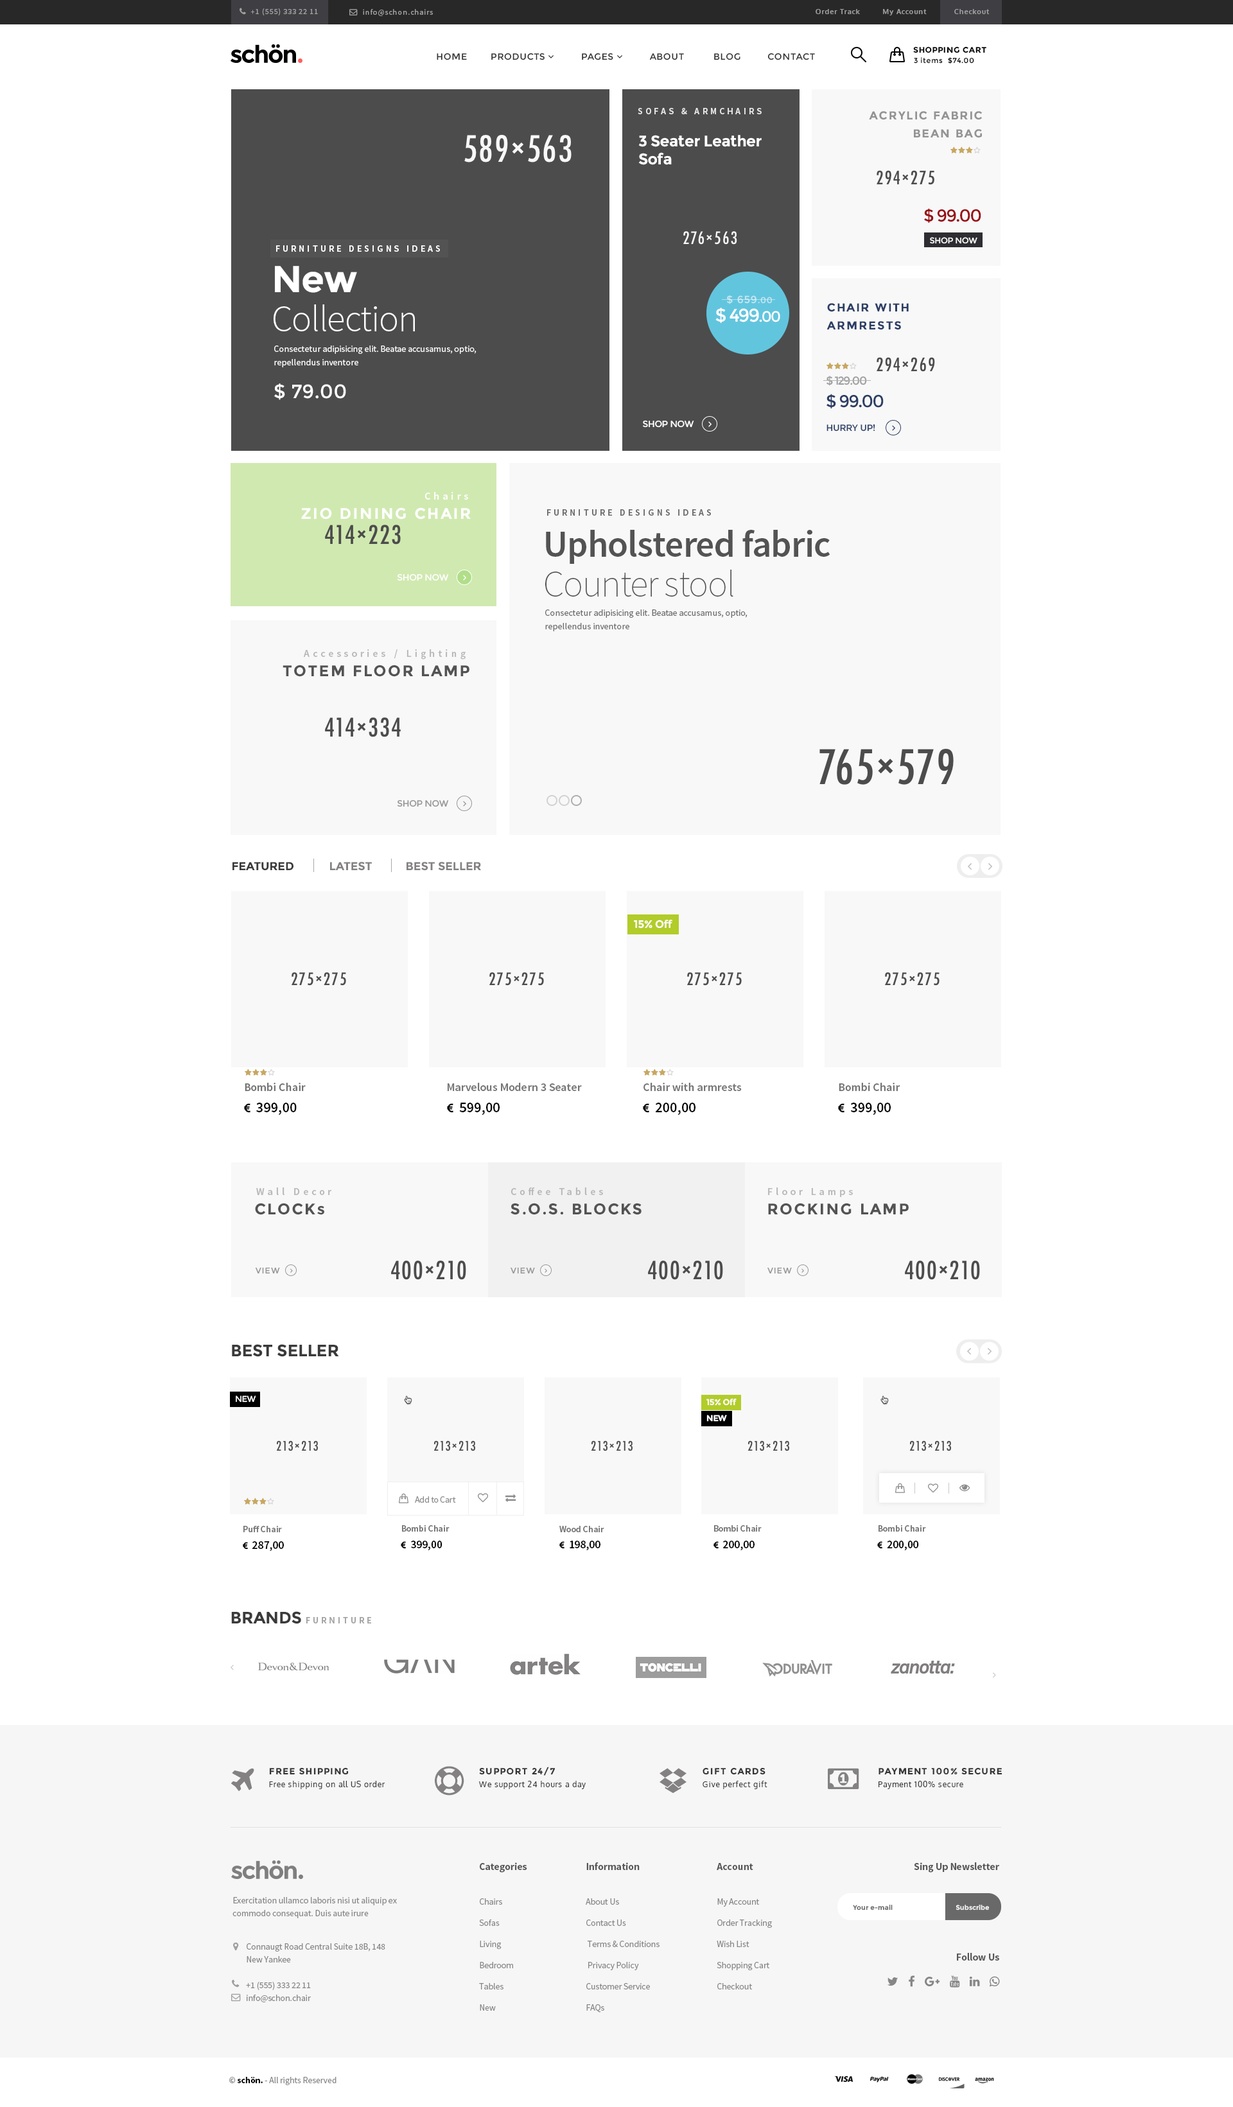
<style>
.page{position:relative;width:1233px;height:2107px;background:#ffffff}
.page>*{position:absolute;margin:0}
.t1{font:7.1px "Oxygen-Bold";letter-spacing:0.08em;color:#a1a1a1}
.t2{font:8px "Montserrat-Bold";letter-spacing:0.06em;color:#000000}
.t3{font:7.1px "Montserrat-Regular";letter-spacing:0.06em;color:#000000}
.t4{font:9px "SourceSansPro-Semibold";letter-spacing:0.3em;color:#e8e8e8}
.t5{font:11.6px/17.9px "Montserrat-Bold";letter-spacing:0.1em;color:#939393}
.t6{font:15.4px/18px "Montserrat-Bold";letter-spacing:-0.02em;color:#ffffff}
.t7{font:17.1px "Montserrat-Regular";letter-spacing:-0.08em;color:#991015}
.t8{font:9px "SourceSansPro-Semibold";letter-spacing:0.3em;color:#ffffff}
.t9{font:8.3px "Montserrat-Regular";letter-spacing:-0.02em;color:#ffffff}
.t10{font:37.4px "Montserrat-Bold";letter-spacing:-0.02em;color:#ffffff}
.t11{font:37.4px "SourceSansPro-Light";letter-spacing:-0.02em;color:#ffffff}
.t12{font:10.2px "Montserrat-Regular";letter-spacing:0.08em;color:#c5e7f1}
.t13{font:8.3px "Montserrat-Regular";letter-spacing:0.08em;color:#c5e7f1}
.t14{font:11.6px/17.9px "Montserrat-Bold";letter-spacing:0.1em;color:#2c3e66}
.t15{font:18.4px "Montserrat-Regular";letter-spacing:-0.06em;color:#ffffff}
.t16{font:15px "Montserrat-Regular";letter-spacing:-0.06em;color:#ffffff}
.t17{font:9px/13.5px "SourceSansPro-Regular";color:#ffffff}
.t18{font:11.4px "Montserrat-Regular";letter-spacing:-0.08em;color:#9f9f9f}
.t19{font:19.3px "Montserrat-Regular";color:#ffffff}
.t20{font:17.1px "Montserrat-Regular";letter-spacing:-0.08em;color:#2c3e65}
.t21{font:9px "Montserrat-Regular";letter-spacing:-0.02em;color:#ffffff}
.t22{font:9px "Montserrat-Regular";letter-spacing:-0.02em;color:#2d4169}
.t23{font:10.3px "SourceSansPro-Semibold";letter-spacing:0.3em;color:#ffffff}
.t24{font:15.4px "Montserrat-Bold";letter-spacing:0.1em;color:#ffffff}
.t25{font:9px "SourceSansPro-Semibold";letter-spacing:0.3em;color:#6a6a6a}
.t26{font:37.3px/39.9px "SourceSansPro-Semibold";letter-spacing:-0.02em;color:#535353}
.t27{font:37.3px/39.9px "SourceSansPro-ExtraLight";letter-spacing:-0.02em;color:#535353}
.t28{font:9px/13.5px "SourceSansPro-Regular";color:#6a6a6a}
.t29{font:10.3px "SourceSansPro-Semibold";letter-spacing:0.3em;color:#b7b7b7}
.t30{font:15.4px "Montserrat-Bold";letter-spacing:0.1em;color:#535353}
.t31{font:9px "Montserrat-Regular";letter-spacing:-0.02em;color:#979797}
.t32{font:11.6px "Montserrat-Bold";letter-spacing:-0.01em;color:#3a3a3a}
.t33{font:11.6px "Montserrat-Bold";letter-spacing:-0.01em;color:#838182}
.t34{font:11px "Montserrat-Bold";letter-spacing:-0.04em;color:#ffffff}
.t35{font:11.5px "SourceSansPro-Semibold";color:#747474}
.t36{font:11.5px "SourceSansPro-Semibold";color:#757575}
.t37{font:8.3px "Montserrat-Regular";letter-spacing:0.06em;color:#979797}
.t38{font:16.5px "Montserrat-Bold";letter-spacing:-0.01em;color:#3a3a3a}
.t39{font:8.5px "Montserrat-Regular";letter-spacing:-0.04em;color:#ffffff}
.t40{font:8.5px "Montserrat-Bold";letter-spacing:-0.04em;color:#ffffff}
.t41{font:9px "SourceSansPro-Regular";letter-spacing:-0.02em;color:#8a8a8a}
.t42{font:9px "SourceSansPro-Semibold";color:#757575}
.t43{font:9px "SourceSansPro-Semibold";color:#747474}
.t44{font:16.6px "Montserrat-Bold";letter-spacing:-0.01em;color:#3a3a3a}
.t45{font:9px "SourceSansPro-Semibold";letter-spacing:0.3em;color:#a0a0a0}
.t46{font:8.9px "Montserrat-Bold";letter-spacing:0.08em;color:#353535}
.t47{font:7.7px "Oxygen-Regular";letter-spacing:0.08em;color:#353535}
.t48{font:10.3px "SourceSansPro-Bold";letter-spacing:-0.01em;color:#575757}
.t49{font:9px/12.8px "SourceSansPro-Regular";letter-spacing:-0.01em;color:#868686}
.t50{font:9px/21.2px "SourceSansPro-Regular";letter-spacing:-0.01em;color:#868686}
.t51{font:6.8px "Montserrat-Bold";color:#696969}
.t52{font:6.8px "Montserrat-Bold";color:#f6f6f6}
.t53{font:9px "SourceSansPro-Regular";letter-spacing:-0.01em;color:#868686}
.t54{font:9px "SourceSansPro-Bold";letter-spacing:-0.01em;color:#868686}
.t55{font:9px "SourceSansPro-Bold";letter-spacing:-0.01em;color:#000000}
</style>
<div class="page">
<p class="t1" style="left:816px;top:9px;width:174px;height:6px">Order Track         My Account           Checkout</p>
<p class="t2" style="left:913px;top:46px;width:73px;height:7px">SHOPPING CART</p>
<p class="t3" style="left:914px;top:57px;width:60px;height:7px">3 items  $74.00</p>
<p class="t4" style="left:638px;top:108px;width:124px;height:6px">SOFAS &amp; ARMCHAIRS</p>
<p class="t5" style="left:869px;top:111px;width:113px;height:27px;text-align:right">ACRYLIC FABRIC<br>BEAN BAG</p>
<p class="t6" style="left:638px;top:135px;width:124px;height:30px">3 Seater Leather Sofa</p>
<p class="t7" style="left:924px;top:208px;width:57px;height:15px">$ 99.00</p>
<p class="t8" style="left:276px;top:245px;width:164px;height:7px">FURNITURE DESIGNS IDEAS</p>
<p class="t9" style="left:930px;top:237px;width:47px;height:7px">SHOP NOW</p>
<p class="t10" style="left:275px;top:266px;width:82px;height:27px">New</p>
<p class="t11" style="left:274px;top:304px;width:141px;height:27px">Collection</p>
<p class="t12" style="left:726px;top:295px;width:47px;height:9px">$ 659<span class="t13">.00</span></p>
<p class="t14" style="left:827px;top:303px;width:82px;height:27px">CHAIR WITH<br>ARMRESTS</p>
<p class="t15" style="left:715px;top:308px;width:65px;height:15px">$ 499<span class="t16">.00</span></p>
<p class="t17" style="left:274px;top:346px;width:203px;height:21px">Consectetur adipisicing elit. Beatae accusamus, optio, repellendus inventore</p>
<p class="t18" style="left:827px;top:376px;width:40px;height:10px">$ 129.00</p>
<p class="t19" style="left:274px;top:383px;width:72px;height:17px">$ 79.00</p>
<p class="t20" style="left:827px;top:394px;width:57px;height:14px">$ 99.00</p>
<p class="t21" style="left:643px;top:420px;width:51px;height:8px">SHOP NOW</p>
<p class="t22" style="left:827px;top:424px;width:48px;height:8px">HURRY UP!</p>
<p class="t23" style="left:424px;top:492px;width:44px;height:8px">Chairs</p>
<p class="t24" style="left:301px;top:507px;width:170px;height:13px">ZIO DINING CHAIR</p>
<p class="t25" style="left:547px;top:509px;width:164px;height:7px">FURNITURE DESIGNS IDEAS</p>
<p class="t26" style="left:545px;top:530px;width:285px;height:67px">Upholstered fabric<br><span class="t27">Counter stool</span></p>
<p class="t21" style="left:397px;top:573px;width:52px;height:8px">SHOP NOW</p>
<p class="t28" style="left:545px;top:609px;width:203px;height:22px">Consectetur adipisicing elit. Beatae accusamus, optio, repellendus inventore</p>
<p class="t29" style="left:303px;top:649px;width:163px;height:11px">Accessories / Lighting</p>
<p class="t30" style="left:283px;top:665px;width:186px;height:12px">TOTEM FLOOR LAMP</p>
<p class="t31" style="left:397px;top:800px;width:52px;height:7px">SHOP NOW</p>
<p class="t32" style="left:232px;top:862px;width:61px;height:9px">FEATURED</p>
<p class="t33" style="left:330px;top:862px;width:42px;height:9px">LATEST</p>
<p class="t33" style="left:407px;top:862px;width:74px;height:9px">BEST SELLER</p>
<p class="t34" style="left:634px;top:920px;width:38px;height:9px">15% Off</p>
<p class="t35" style="left:245px;top:1083px;width:61px;height:8px">Bombi Chair</p>
<p class="t36" style="left:447px;top:1083px;width:135px;height:8px">Marvelous Modern 3 Seater</p>
<p class="t36" style="left:643px;top:1083px;width:99px;height:8px">Chair with armrests</p>
<p class="t35" style="left:839px;top:1083px;width:61px;height:8px">Bombi Chair</p>
<p class="t29" style="left:256px;top:1187px;width:75px;height:8px">Wall Decor</p>
<p class="t29" style="left:511px;top:1187px;width:92px;height:8px">Coffee Tables</p>
<p class="t29" style="left:768px;top:1187px;width:85px;height:10px">Floor Lamps</p>
<p class="t30" style="left:255px;top:1203px;width:69px;height:12px">CLOCKs</p>
<p class="t30" style="left:511px;top:1203px;width:131px;height:12px">S.O.S. BLOCKS</p>
<p class="t30" style="left:768px;top:1203px;width:141px;height:12px">ROCKING LAMP</p>
<p class="t37" style="left:255px;top:1267px;width:25px;height:7px">VIEW</p>
<p class="t37" style="left:511px;top:1267px;width:24px;height:7px">VIEW</p>
<p class="t37" style="left:767px;top:1267px;width:25px;height:7px">VIEW</p>
<p class="t38" style="left:232px;top:1344px;width:107px;height:13px">BEST SELLER</p>
<p class="t39" style="left:236px;top:1395px;width:20px;height:8px">NEW</p>
<p class="t40" style="left:706px;top:1398px;width:31px;height:8px">15% Off</p>
<p class="t40" style="left:706px;top:1415px;width:21px;height:7px">NEW</p>
<p class="t41" style="left:415px;top:1496px;width:41px;height:7px">Add to Cart</p>
<p class="t42" style="left:243px;top:1526px;width:39px;height:6px">Puff Chair</p>
<p class="t43" style="left:402px;top:1525px;width:48px;height:7px">Bombi Chair</p>
<p class="t42" style="left:559px;top:1526px;width:45px;height:6px">Wood Chair</p>
<p class="t42" style="left:714px;top:1525px;width:48px;height:7px">Bombi Chair</p>
<p class="t42" style="left:879px;top:1525px;width:47px;height:7px">Bombi Chair</p>
<p class="t44" style="left:231px;top:1611px;width:70px;height:13px">BRANDS</p>
<p class="t45" style="left:306px;top:1617px;width:65px;height:6px">FURNITURE</p>
<p class="t46" style="left:269px;top:1767px;width:80px;height:8px">FREE SHIPPING</p>
<p class="t46" style="left:479px;top:1767px;width:76px;height:9px">SUPPORT 24/7</p>
<p class="t46" style="left:703px;top:1767px;width:62px;height:8px">GIFT CARDS</p>
<p class="t46" style="left:879px;top:1767px;width:123px;height:8px">PAYMENT 100% SECURE</p>
<p class="t47" style="left:269px;top:1781px;width:116px;height:8px">Free shipping on all US order</p>
<p class="t47" style="left:478px;top:1781px;width:108px;height:8px">We support 24 hours a day</p>
<p class="t47" style="left:703px;top:1781px;width:64px;height:8px">Give perfect gift</p>
<p class="t47" style="left:879px;top:1781px;width:84px;height:8px">Payment 100% secure</p>
<p class="t48" style="left:480px;top:1862px;width:47px;height:11px">Categories</p>
<p class="t48" style="left:586px;top:1862px;width:54px;height:8px">Information</p>
<p class="t48" style="left:717px;top:1863px;width:36px;height:7px">Account</p>
<p class="t48" style="left:914px;top:1862px;width:85px;height:11px">Sing Up Newsletter</p>
<p class="t49" style="left:232px;top:1897px;width:165px;height:21px">Exercitation ullamco laboris nisi ut aliquip ex<br>commodo consequat. Duis aute irure</p>
<p class="t50" style="left:479px;top:1898px;width:34px;height:113px">Chairs<br>Sofas<br>Living<br>Bedroom<br>Tables<br>New</p>
<p class="t50" style="left:586px;top:1898px;width:74px;height:115px">About Us<br>Contact Us<br> Terms &amp; Conditions<br> Privacy Policy<br>Customer Service<br>FAQs</p>
<p class="t50" style="left:717px;top:1898px;width:55px;height:92px">My Account<br>Order Tracking<br>Wish List<br>Shopping Cart<br>Checkout</p>
<p class="t51" style="left:853px;top:1905px;width:40px;height:6px">Your e-mail</p>
<p class="t52" style="left:956px;top:1905px;width:34px;height:6px">Subscribe</p>
<p class="t49" style="left:246px;top:1943px;width:139px;height:59px">Connaugt Road Central Suite 18B, 148<br>New Yankee<br><br>+1 (555) 333 22 11<br>info@schon.chair</p>
<p class="t48" style="left:957px;top:1953px;width:42px;height:8px">Follow Us</p>
<p class="t53" style="left:229px;top:2077px;width:108px;height:8px"><span class="t54">©</span><span class="t55"> schön. </span>- All rights Reserved</p>
</div>
